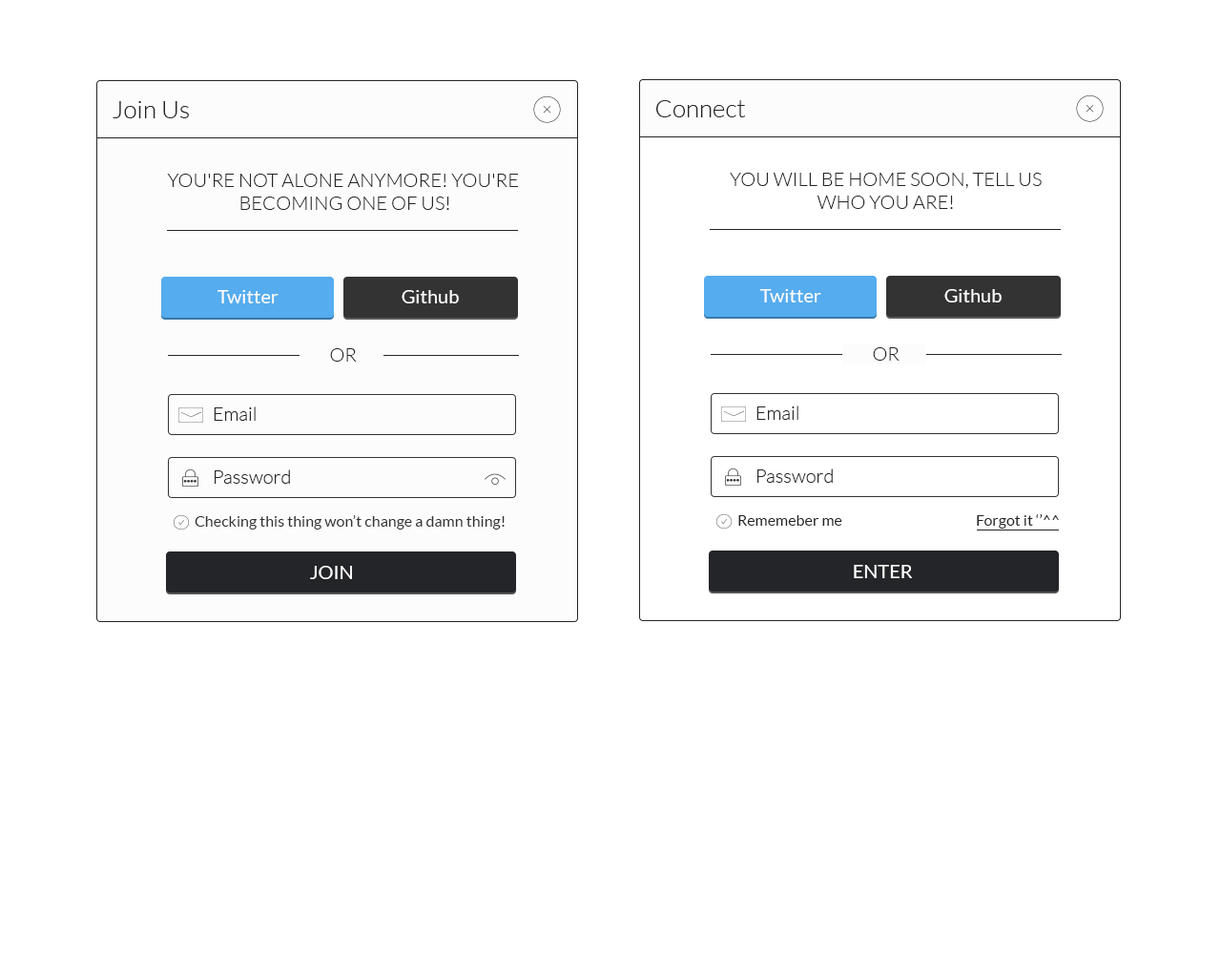
<style>
.page{position:relative;width:1221px;height:977px;background:#ffffff}
.page>*{position:absolute;margin:0}
.t1{font:24.8px "Lato-Light";color:#242528}
.t2{font:19.1px "Lato-Light";color:#242528}
.t3{font:19.1px "Lato-Regular";color:#fcfcfc}
.t4{font:15.3px "Lato-Regular";color:#333333}
.t5{font:15.3px "Lato-Regular";color:#242528}
.t6{font:19.1px "Lato-Regular";color:#ffffff}
</style>
<div class="page">
<p class="t1" style="left:113px;top:101px;width:76px;height:17px">Join Us</p>
<p class="t1" style="left:656px;top:100px;width:90px;height:17px">Connect</p>
<p class="t2" style="left:167px;top:174px;width:351px;height:36px;text-align:center">YOU'RE NOT ALONE ANYMORE! YOU'RE<br> BECOMING ONE OF US!</p>
<p class="t2" style="left:730px;top:173px;width:312px;height:36px;text-align:center">YOU WILL BE HOME SOON, TELL US<br>WHO YOU ARE!</p>
<p class="t3" style="left:217px;top:290px;width:62px;height:13px">Twitter</p>
<p class="t3" style="left:402px;top:290px;width:57px;height:13px">Github</p>
<p class="t3" style="left:759px;top:289px;width:62px;height:13px">Twitter</p>
<p class="t3" style="left:944px;top:289px;width:58px;height:13px">Github</p>
<p class="t2" style="left:330px;top:348px;width:27px;height:13px">OR</p>
<p class="t2" style="left:873px;top:347px;width:26px;height:14px">OR</p>
<p class="t2" style="left:214px;top:406px;width:42px;height:15px">Email</p>
<p class="t2" style="left:756px;top:405px;width:42px;height:15px">Email</p>
<p class="t2" style="left:215px;top:469px;width:75px;height:15px">Password</p>
<p class="t2" style="left:757px;top:468px;width:76px;height:15px">Password</p>
<p class="t4" style="left:195px;top:515px;width:310px;height:14px">Checking this thing won’t change a damn thing!</p>
<p class="t5" style="left:738px;top:515px;width:104px;height:11px">Rememeber me</p>
<p class="t5" style="left:977px;top:513px;width:82px;height:15px">Forgot it ‘’^^</p>
<p class="t6" style="left:310px;top:566px;width:42px;height:13px">JOIN</p>
<p class="t6" style="left:854px;top:565px;width:59px;height:13px">ENTER</p>
</div>
